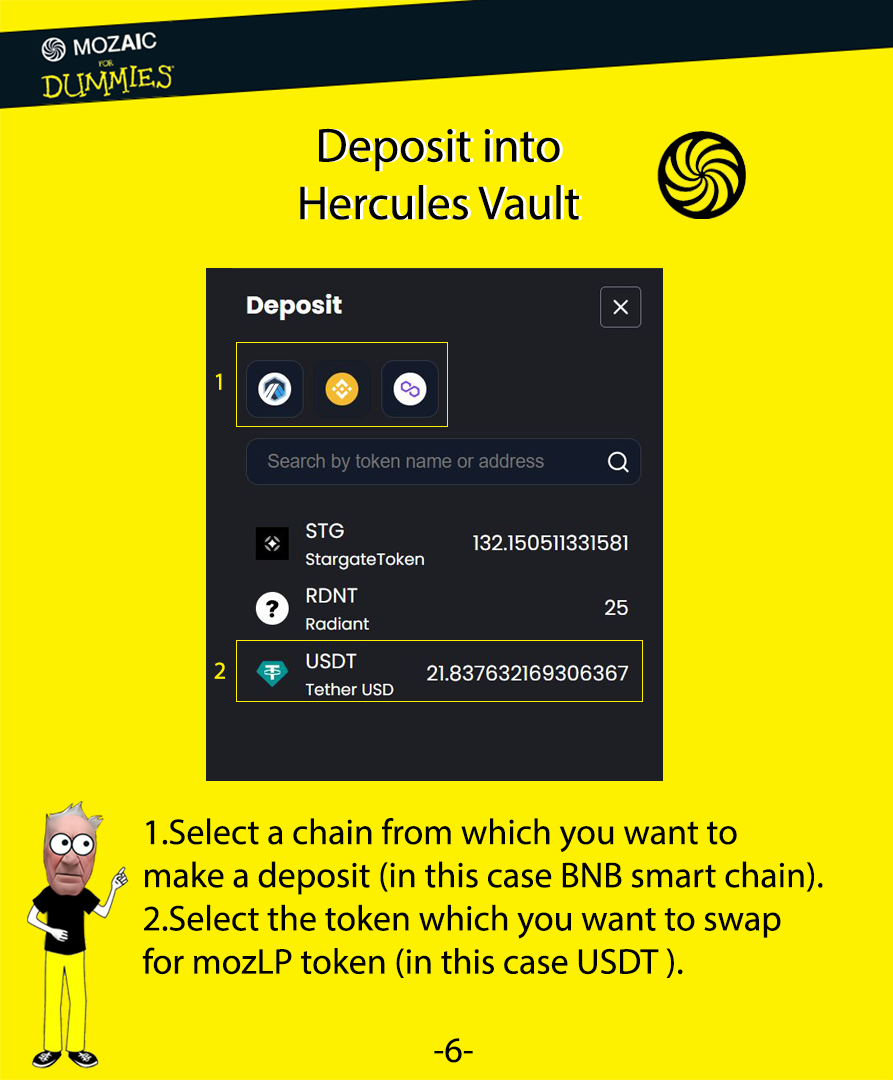
<style>
.page{position:relative;width:893px;height:1080px;background:#fdf100}
.page>*{position:absolute;margin:0}
.t1{font:48px "MyriadPro-Regular";color:#000000}
.t2{font:48px "MyriadPro-Regular"}
.t3{font:24px "MyriadPro-Regular";color:#fdf100}
.t4{font:36px "MyriadPro-Regular";color:#000000}
</style>
<div class="page">
<p class="t1" style="left:300px;top:128px;width:279px;height:92px;text-align:center">Deposit into <br>Hercules Vault</p>
<p class="t2" style="left:303px;top:128px;width:279px;height:92px;text-align:center">Deposit into <br>Hercules Vault</p>
<p class="t3" style="left:215px;top:373px;width:7px;height:17px">1</p>
<p class="t3" style="left:214px;top:662px;width:11px;height:17px">2</p>
<p class="t4" style="left:142px;top:818px;width:681px;height:160px">1.Select a chain from which you want to make a deposit (in this case BNB smart chain).<br>2.Select the token which you want to swap for mozLP token (in this case USDT ).</p>
<p class="t4" style="left:434px;top:1038px;width:39px;height:25px;text-align:center">-6-<br>--</p>
</div>
